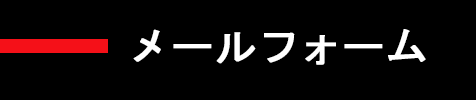
<style>
.page{position:relative;width:476px;height:100px;background:#000000}
.page>*{position:absolute;margin:0}
.t1{font:41.7px "MS-Gothic";color:#ffffff;font-weight:bold}
</style>
<div class="page">
<p class="t1" style="left:133px;top:29px;width:293px;height:36px">メールフォーム</p>
</div>
